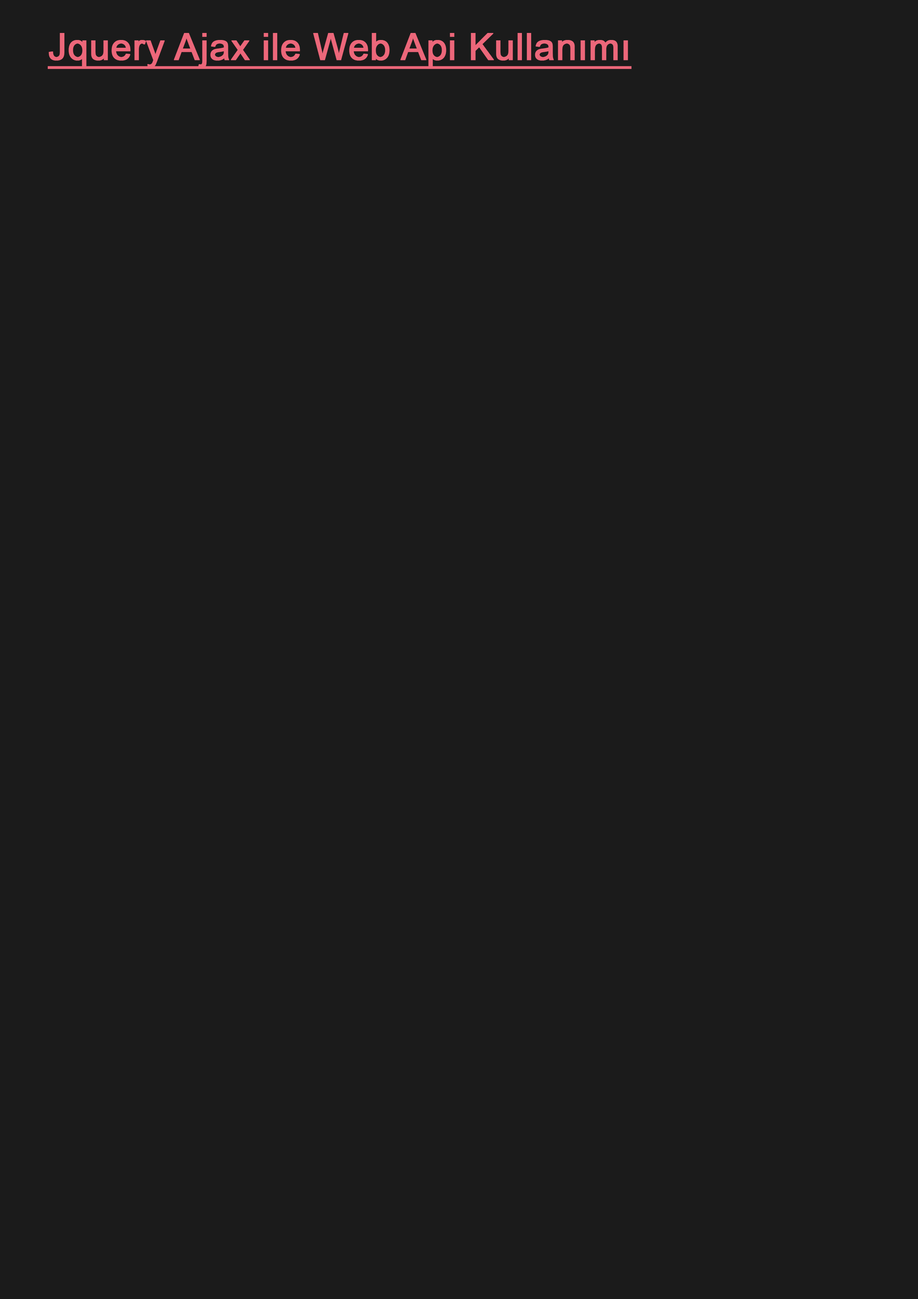
<style>
.page{position:relative;width:918px;height:1299px;background:#1b1b1b}
.page>*{position:absolute;margin:0}
.t1{font:37px "ArialMT";color:#ec677a;font-weight:bold;text-decoration:underline}
</style>
<div class="page">
<p class="t1" style="left:48px;top:33px;width:584px;height:36px">Jquery Ajax ile Web Api Kullanımı</p>
</div>
